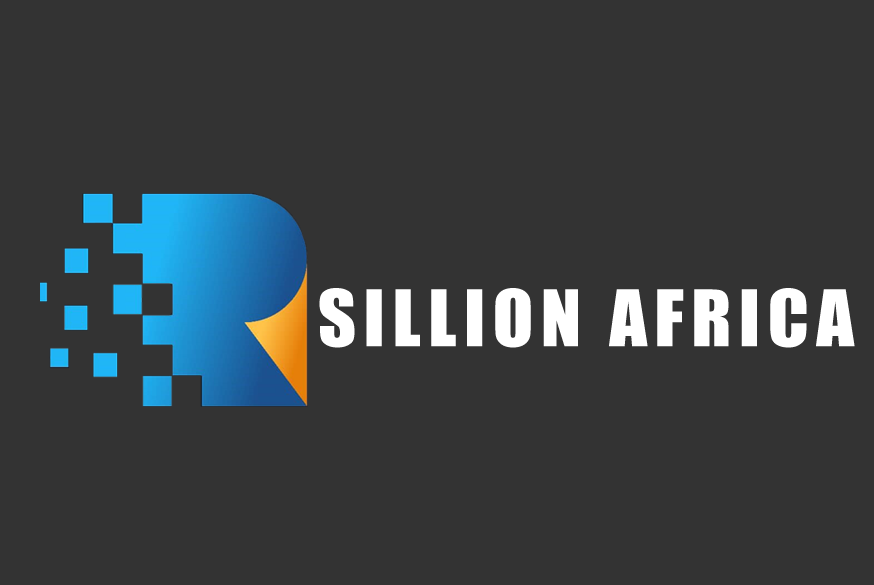
<style>
.page{position:relative;width:874px;height:585px;background:#333333}
.page>*{position:absolute;margin:0}
.t1{font:72.2px "Impact";letter-spacing:0.1em;color:#ffffff}
</style>
<div class="page">
<p class="t1" style="left:319px;top:288px;width:536px;height:60px">SILLION AFRICA</p>
</div>
